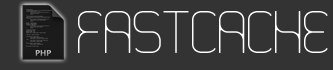
<style>
.page{position:relative;width:333px;height:70px;background:#333333}
.page>*{position:absolute;margin:0}
.t1{font:44px "happysquid";color:#ffffff}
</style>
<div class="page">
<p class="t1" style="left:78px;top:11px;width:250px;height:42px">fastcache</p>
</div>
